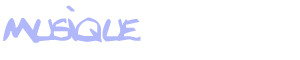
<style>
.page{position:relative;width:300px;height:60px;background:#ffffff}
.page>*{position:absolute;margin:0}
.t1{font:60px "Texted'critureLanfeust";color:#b0b8f9}
</style>
<div class="page">
<p class="t1" style="left:3px;top:5px;width:138px;height:38px">musique</p>
</div>
